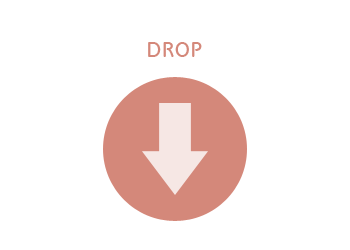
<style>
.page{position:relative;width:350px;height:250px;background:#ffffff}
.page>*{position:absolute;margin:0}
.t1{font:24px "SpeakOffc-Heavy";color:#d4887a}
</style>
<div class="page">
<p class="t1" style="left:148px;top:42px;width:54px;height:15px">DROP</p>
</div>
